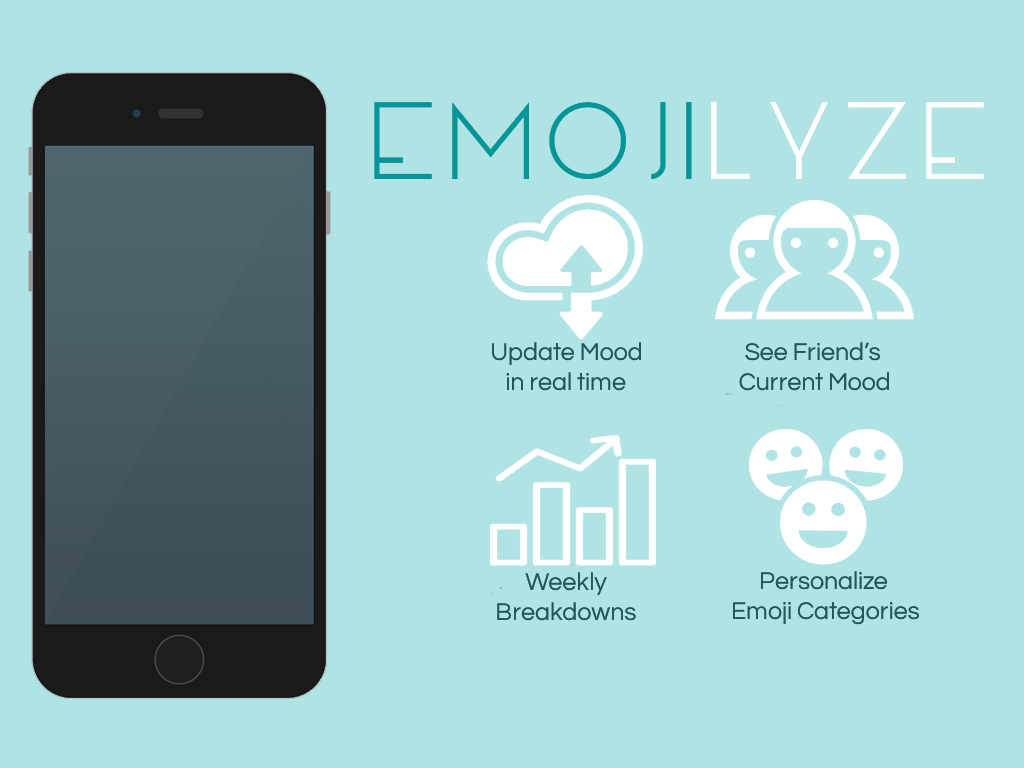
<style>
.page{position:relative;width:1024px;height:768px;background:#b0e3e4}
.page>*{position:absolute;margin:0}
.t1{font:105px "MANIFESTO"}
.t2{font:25px "Questrial-Regular";color:#235657}
.t3{font:25px "MANIFESTO";color:#235657}
</style>
<div class="page">
<p class="t1" style="left:374px;top:102px;width:610px;height:77px">EMojilyze</p>
<p class="t2" style="left:492px;top:342px;width:149px;height:49px">Update Mood<br>   in real time</p>
<p class="t2" style="left:739px;top:342px;width:150px;height:49px"><span class="t3">   </span>See Friend’s <br>   Current Mood</p>
<p class="t2" style="left:497px;top:572px;width:139px;height:49px"><span class="t3">     </span>Weekly<br> Breakdowns</p>
<p class="t2" style="left:733px;top:571px;width:186px;height:54px"><span class="t3">    </span>Personalize<br>Emoji Categories</p>
</div>
